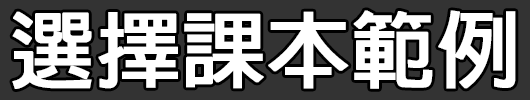
<style>
.page{position:relative;width:530px;height:100px;background:#ffffff}
.page>*{position:absolute;margin:0}
.t1{font:82.7px "AdobeFanHeitiStd-Bold";color:#ffffff;font-weight:bold}
</style>
<div class="page">
<p class="t1" style="left:12px;top:10px;width:504px;height:79px">選擇課本範例</p>
</div>
